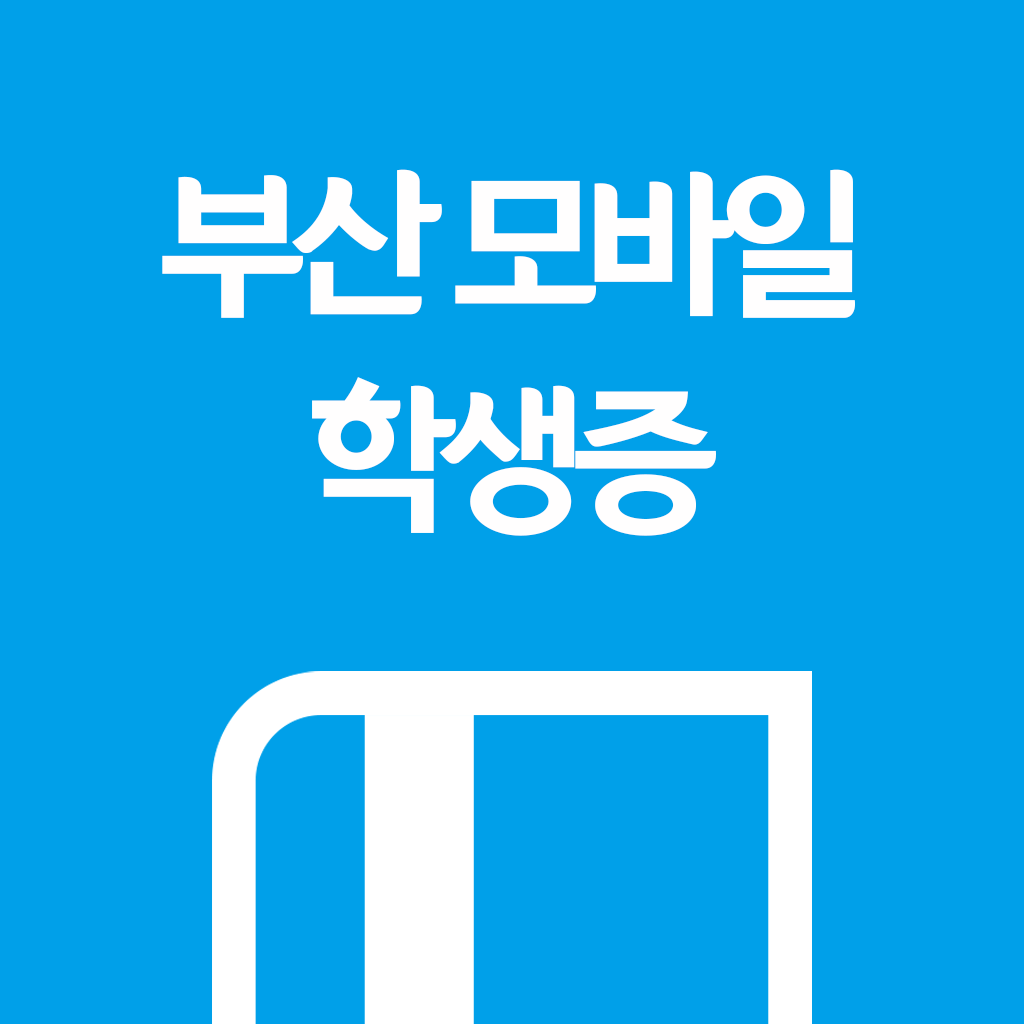
<style>
.page{position:relative;width:1024px;height:1024px;background:#00a0e9}
.page>*{position:absolute;margin:0}
.t1{font:180px "YiSunShinDotumB";letter-spacing:-0.1em;color:#fffefe}
</style>
<div class="page">
<p class="t1" style="left:162px;top:169px;width:693px;height:367px;text-align:center">부산 모바일<br>학생증</p>
</div>
